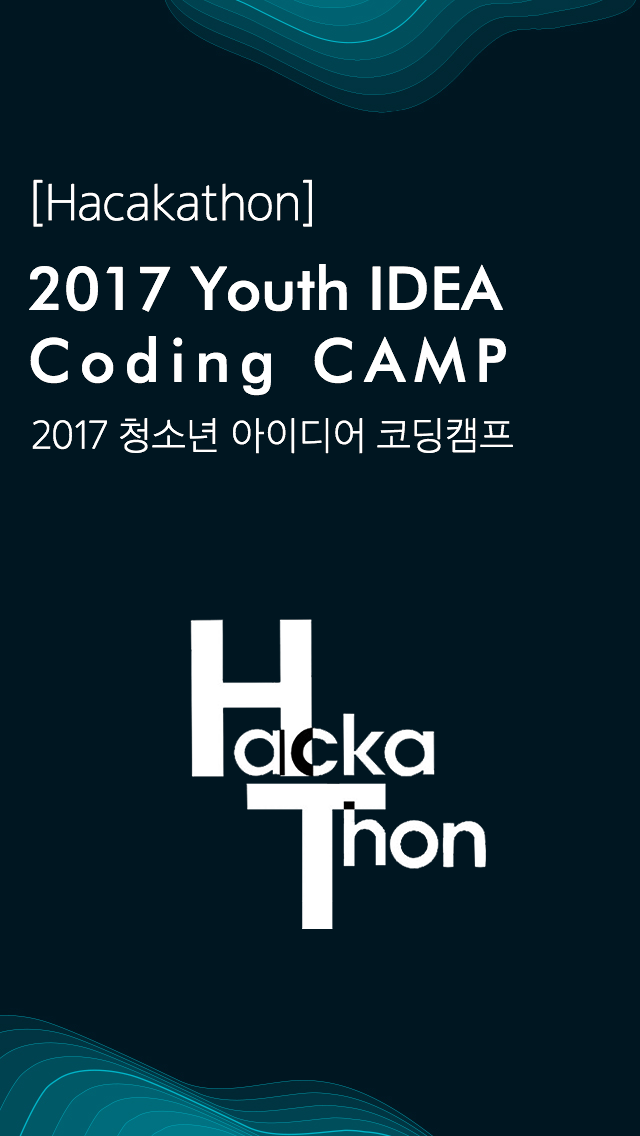
<style>
.page{position:relative;width:640px;height:1136px;background:#001621}
.page>*{position:absolute;margin:0}
.t1{font:48px "SECGCOTFUL";letter-spacing:0.02em;color:#ffffff}
.t2{font:60px "FuturaBT-Medium";color:#ffffff}
.t3{font:60px "FuturaBT-Medium";letter-spacing:0.16em;color:#ffffff}
.t4{font:37px "SECGCOTFUL";letter-spacing:0.02em;color:#ffffff}
</style>
<div class="page">
<p class="t1" style="left:33px;top:179px;width:279px;height:48px">[Hacakathon]</p>
<p class="t2" style="left:29px;top:264px;width:477px;height:132px">2017 Youth IDEA <br><span class="t3">Coding CAMP</span></p>
<p class="t4" style="left:32px;top:418px;width:481px;height:36px">2017 청소년 아이디어 코딩캠프</p>
</div>
